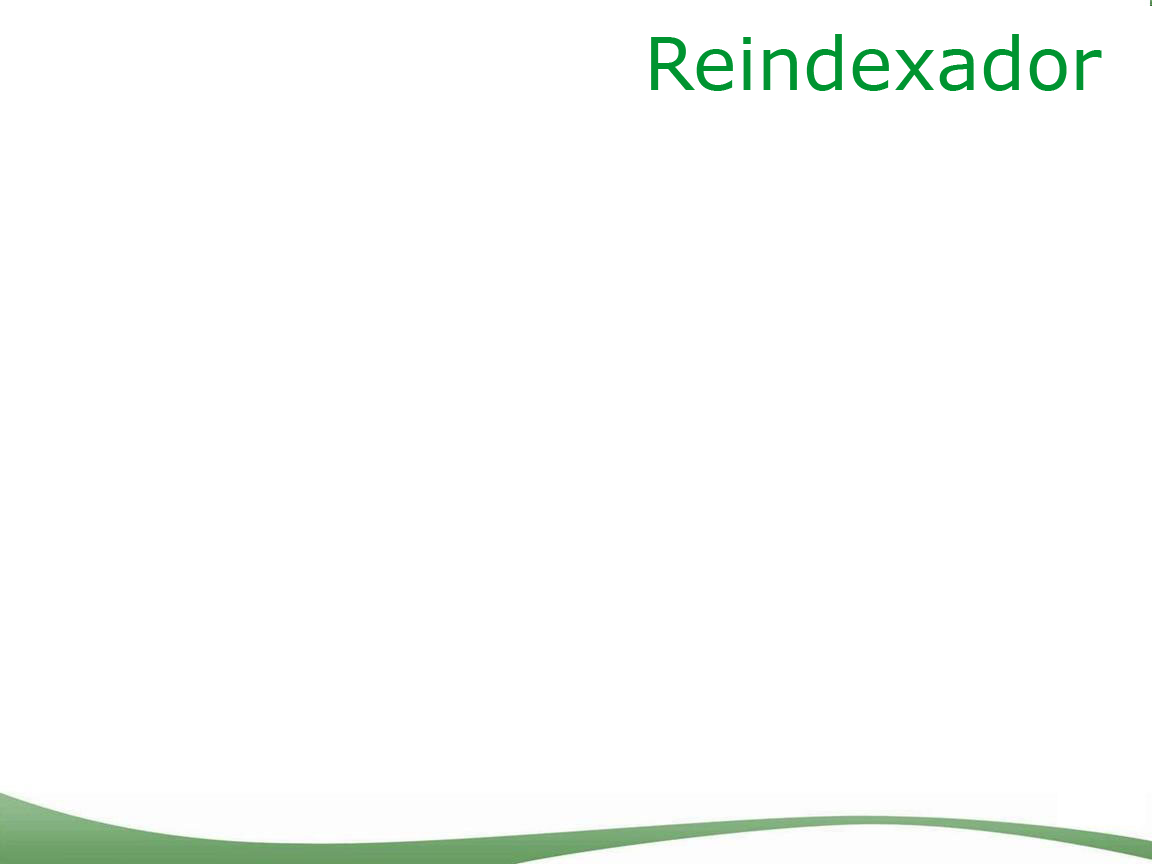
<style>
.page{position:relative;width:1152px;height:864px;background:#ffffff}
.page>*{position:absolute;margin:0}
.t1{font:73.3px "Verdana";color:#009430}
</style>
<div class="page">
<p class="t1" style="left:651px;top:34px;width:451px;height:57px">Reindexador</p>
</div>
